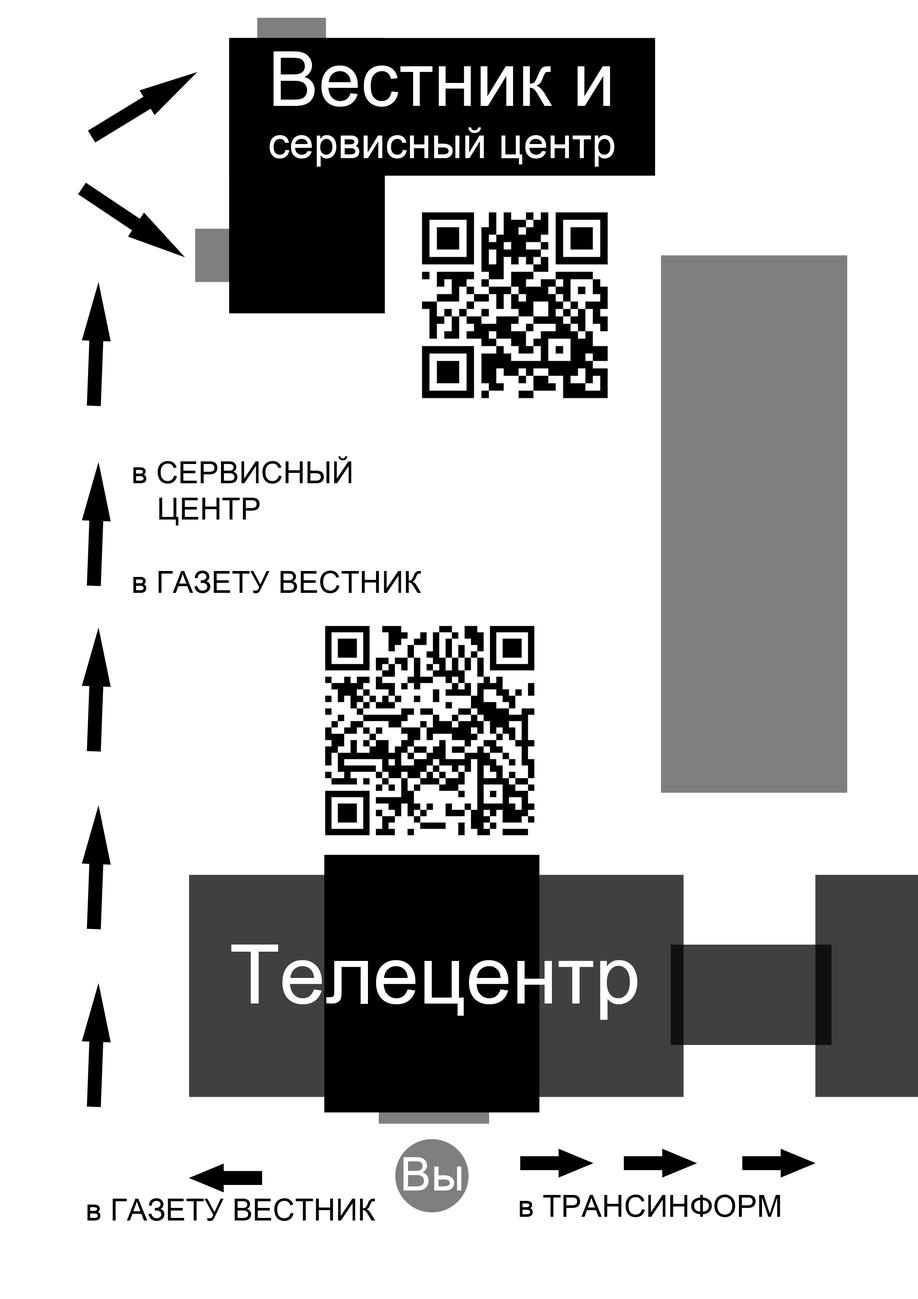
<style>
.page{position:relative;width:918px;height:1299px;background:#ffffff}
.page>*{position:absolute;margin:0}
.t1{font:43.5px "ArialMT";color:#ffffff}
.t2{font:76.1px "ArialMT";color:#ffffff}
.t3{font:30.5px "ArialMT";color:#000000}
.t4{font:82.2px "ArialMT";color:#ffffff}
.t5{font:46.3px "ArialMT";color:#ffffff}
</style>
<div class="page">
<p class="t1" style="left:270px;top:51px;width:345px;height:116px"><span class="t2">Вестник и<br></span>сервисный центр</p>
<p class="t3" style="left:133px;top:456px;width:288px;height:137px">в СЕРВИСНЫЙ<br>   ЦЕНТР<br><br>в ГАЗЕТУ ВЕСТНИК</p>
<p class="t4" style="left:231px;top:944px;width:407px;height:76px">Телецентр</p>
<p class="t5" style="left:404px;top:1157px;width:58px;height:33px">Вы</p>
<p class="t3" style="left:87px;top:1198px;width:288px;height:23px">в ГАЗЕТУ ВЕСТНИК</p>
<p class="t3" style="left:520px;top:1194px;width:260px;height:23px">в ТРАНСИНФОРМ</p>
</div>
